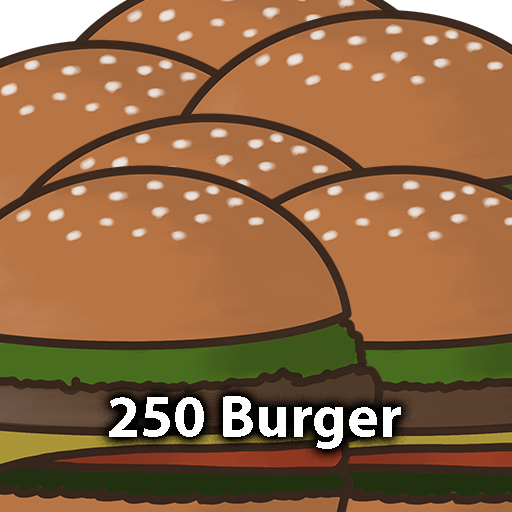
<style>
.page{position:relative;width:512px;height:512px;background:#b77444}
.page>*{position:absolute;margin:0}
.t1{font:60px "MyriadPro-Bold";color:#ffffff}
</style>
<div class="page">
<p class="t1" style="left:109px;top:396px;width:292px;height:53px">250 Burger</p>
</div>
